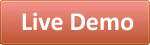
<style>
.page{position:relative;width:150px;height:45px}
.page>*{position:absolute;margin:0}
.t1{font:26px "Calibri-Bold";color:#ffffff}
</style>
<div class="page">
<p class="t1" style="left:22px;top:12px;width:112px;height:19px">Live Demo</p>
</div>
